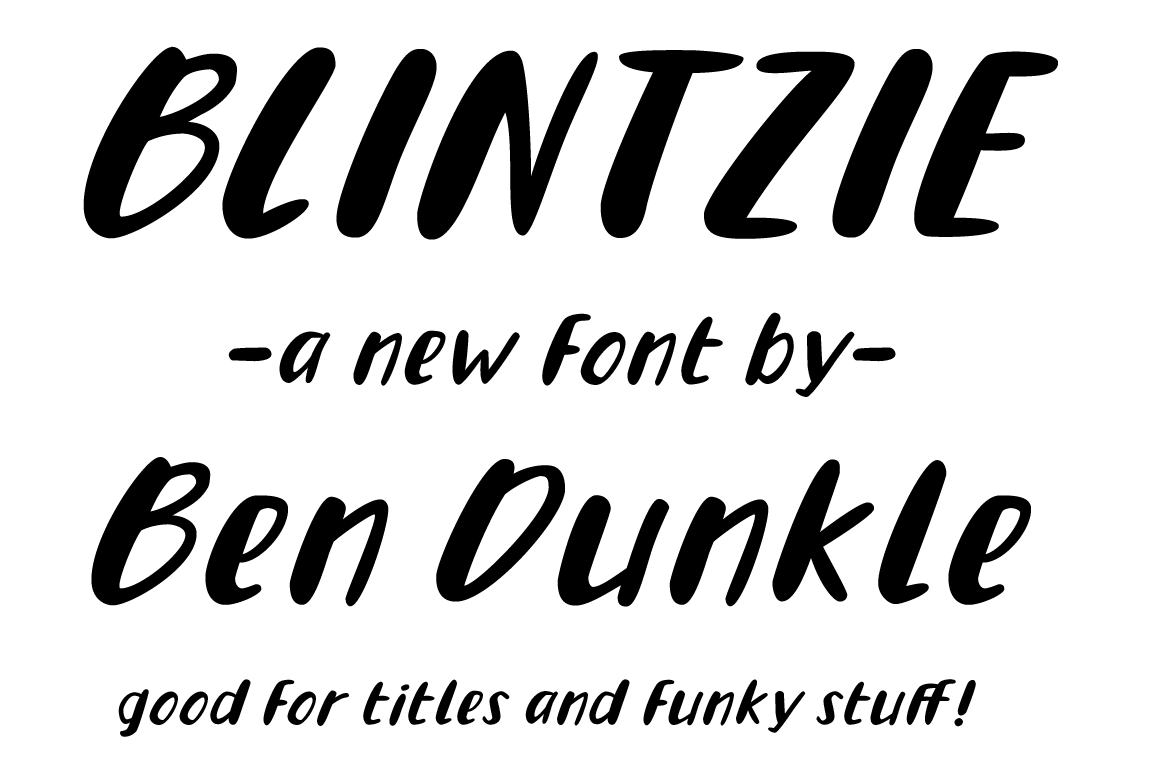
<style>
.page{position:relative;width:1152px;height:774px;background:#ffffff}
.page>*{position:absolute;margin:0}
.t1{font:242.9px "BlintzieRegular";letter-spacing:0.06em;color:#000000}
.t2{font:92.9px "BlintzieRegular";letter-spacing:0.06em;color:#000000}
.t3{font:187.9px "BlintzieRegular";letter-spacing:0.06em;color:#000000}
.t4{font:58.9px "BlintzieRegular";letter-spacing:0.06em;color:#000000}
</style>
<div class="page">
<p class="t1" style="left:83px;top:46px;width:975px;height:194px">BLINTZIE</p>
<p class="t2" style="left:228px;top:312px;width:668px;height:85px">-a new font by-</p>
<p class="t3" style="left:91px;top:457px;width:940px;height:150px">Ben Dunkle</p>
<p class="t4" style="left:118px;top:679px;width:858px;height:58px">good for titles and funky stuff!</p>
</div>
